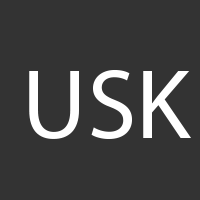
<style>
.page{position:relative;width:200px;height:200px;background:#333333}
.page>*{position:absolute;margin:0}
.t1{font:100px "MyriadPro-Regular";color:#ffffff}
</style>
<div class="page">
<p class="t1" style="left:29px;top:69px;width:162px;height:70px">USK</p>
</div>
